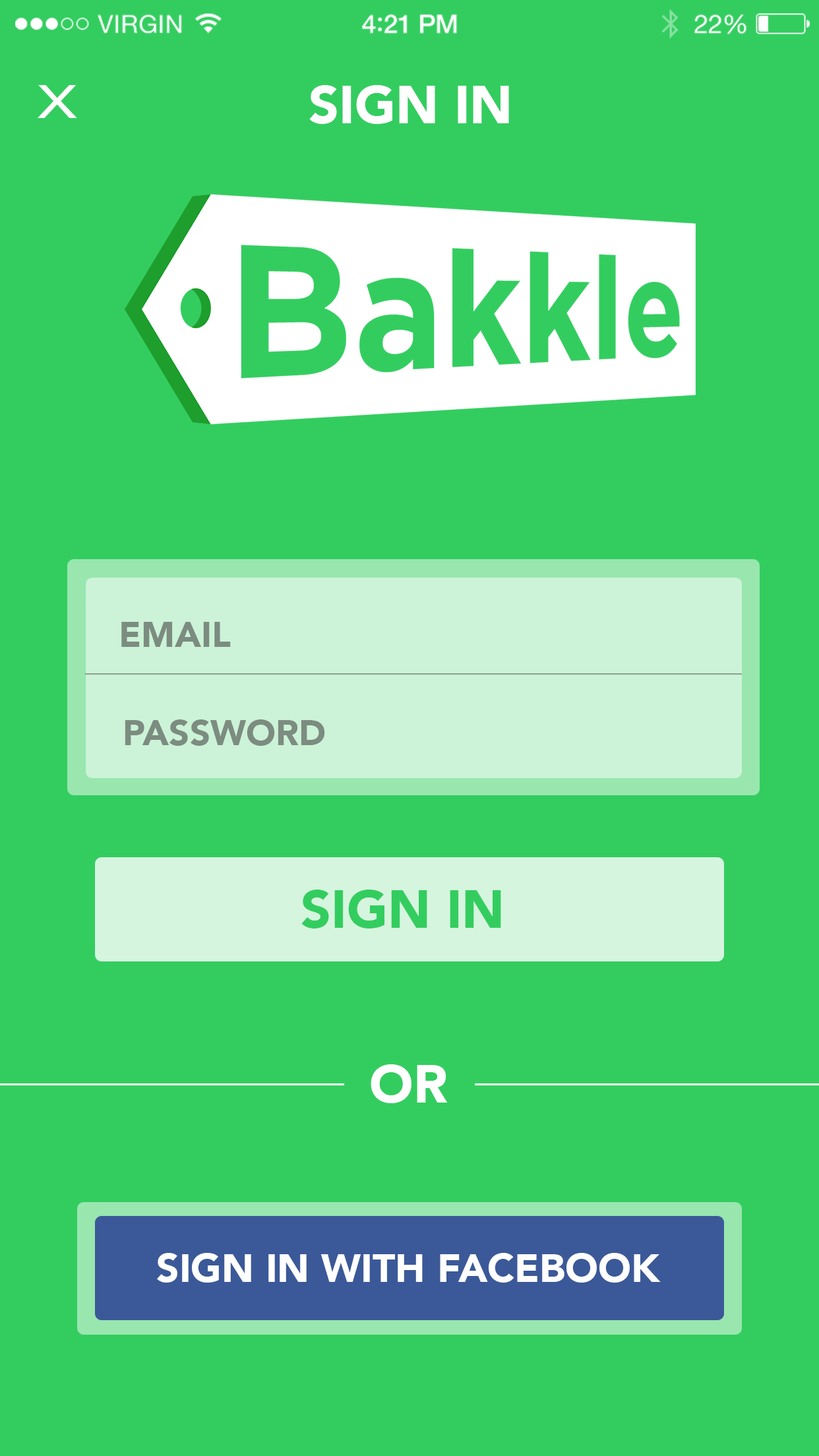
<style>
.page{position:relative;width:819px;height:1456px;background:#33cd5f}
.page>*{position:absolute;margin:0}
.t1{font:46.2px "HelveticaNeue";color:#ffffff;scale:1.39 1}
.t2{font:52.8px "Avenir-Black";color:#ffffff}
.t3{font:35.7px "Avenir-Black";color:#7c8c80}
.t4{font:52.8px "Avenir-Black";color:#33cd5f}
.t5{font:39.6px "Avenir-Black";color:#ffffff}
</style>
<div class="page">
<p class="t1" style="left:38px;top:85px;width:39px;height:33px">X</p>
<p class="t2" style="left:309px;top:85px;width:200px;height:39px">SIGN IN</p>
<p class="t3" style="left:121px;top:622px;width:110px;height:25px">EMAIL</p>
<p class="t3" style="left:125px;top:719px;width:200px;height:27px">PASSWORD</p>
<p class="t4" style="left:301px;top:890px;width:200px;height:38px">SIGN IN</p>
<p class="t2" style="left:371px;top:1064px;width:77px;height:39px">OR</p>
<p class="t5" style="left:157px;top:1253px;width:504px;height:30px">SIGN IN WITH FACEBOOK</p>
</div>
